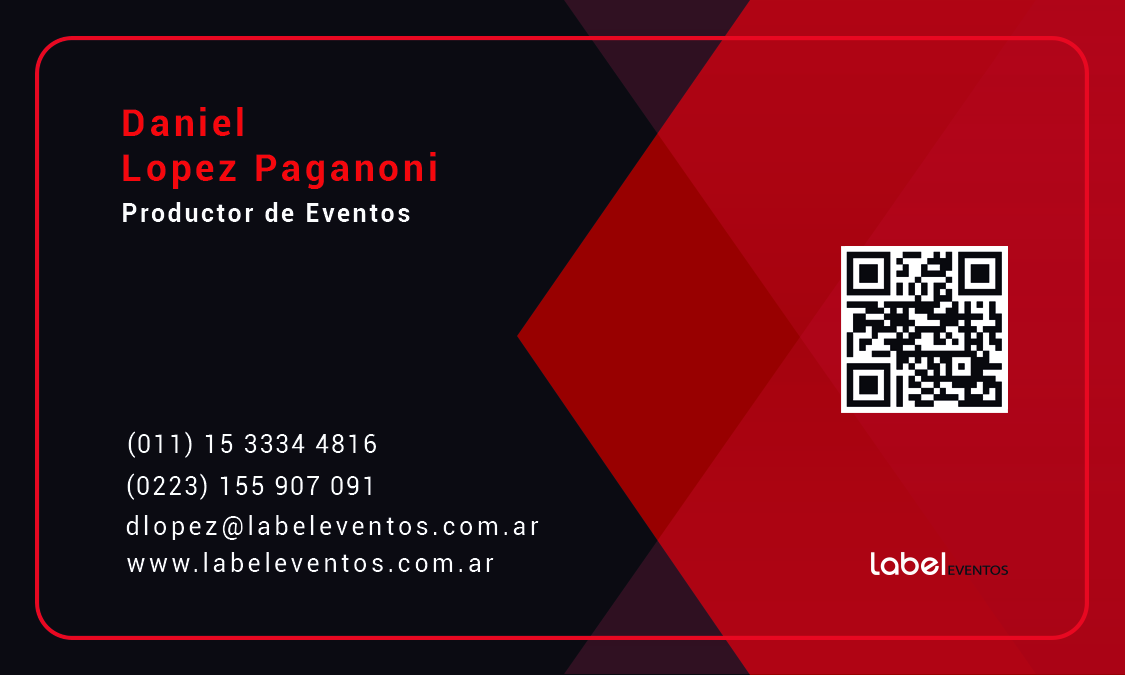
<style>
.page{position:relative;width:1125px;height:675px;background:#0b0b12}
.page>*{position:absolute;margin:0}
.t1{font:37.5px "Roboto-Bold";letter-spacing:0.1em;color:#f5070d}
.t2{font:25px "Roboto-Bold";letter-spacing:0.1em;color:#fbfcfd}
.t3{font:25px "Roboto-Regular";letter-spacing:0.075em;color:#fbfdfd}
.t4{font:25px "Roboto-Regular";letter-spacing:0.14em;color:#fbfcfd}
</style>
<div class="page">
<p class="t1" style="left:123px;top:107px;width:313px;height:82px">Daniel<br>Lopez Paganoni</p>
<p class="t2" style="left:123px;top:202px;width:287px;height:20px">Productor de Eventos</p>
<p class="t3" style="left:128px;top:431px;width:248px;height:27px">(011) 15 3334 4816</p>
<p class="t3" style="left:127px;top:473px;width:244px;height:27px">(0223) 155 907 091</p>
<p class="t4" style="left:126px;top:515px;width:413px;height:25px">dlopez@labeleventos.com.ar</p>
<p class="t4" style="left:127px;top:552px;width:367px;height:20px">www.labeleventos.com.ar</p>
</div>
